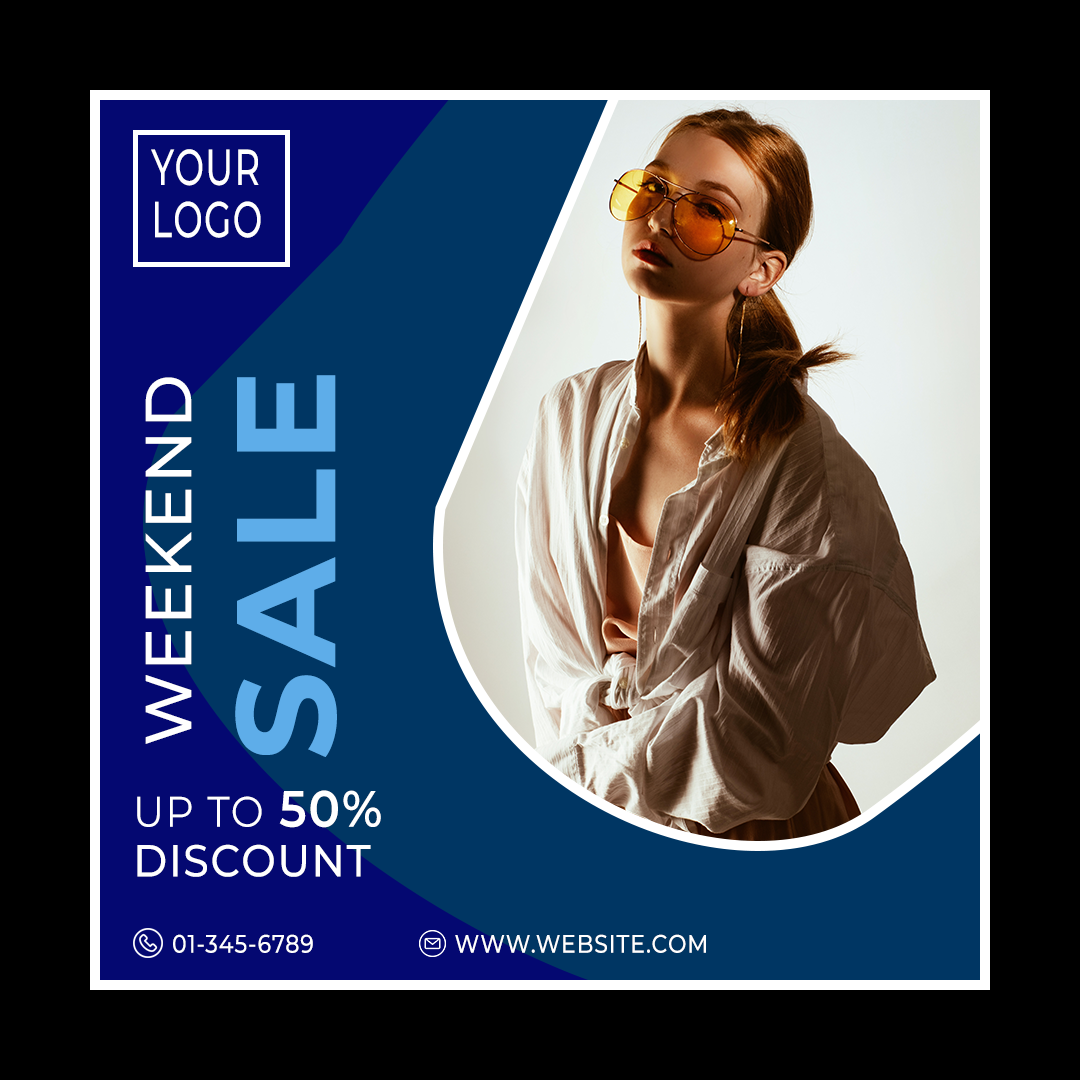
<style>
.page{position:relative;width:1080px;height:1080px;background:#000000}
.page>*{position:absolute;margin:0}
.t1{font:50.6px "Montserrat-Medium";letter-spacing:0.04em;color:#ffffff;scale:0.7 1}
.t2{font:65px "Montserrat-Medium";letter-spacing:0.04em;color:#ffffff}
.t3{font:140px "Montserrat-Bold";letter-spacing:0.04em;color:#5eade9}
.t4{font:42.8px "Montserrat-Regular";letter-spacing:0.04em;color:#ffffff;scale:0.92 1}
.t5{font:51.1px "Montserrat-SemiBold";letter-spacing:0.04em;color:#ffffff;scale:0.92 1}
.t6{font:44.8px "Montserrat-Medium";letter-spacing:0.04em;color:#ffffff;scale:0.92 1}
.t7{font:25.5px "Montserrat-Medium";letter-spacing:0.04em;color:#ffffff;scale:0.86 1}
</style>
<div class="page">
<p class="t1" style="left:151px;top:149px;width:110px;height:89px">YOUR <br>LOGO</p>
<p class="t2" style="left:145px;top:377px;width:47px;height:367px;rotate:-90deg">WEEKEND</p>
<p class="t3" style="left:235px;top:375px;width:102px;height:382px;rotate:-90deg">SALE</p>
<p class="t4" style="left:137px;top:790px;width:244px;height:38px">UP TO <span class="t5">50%</span></p>
<p class="t6" style="left:137px;top:844px;width:234px;height:33px">DISCOUNT</p>
<p class="t7" style="left:173px;top:934px;width:140px;height:19px">01-345-6789</p>
<p class="t7" style="left:455px;top:934px;width:251px;height:19px">WWW.WEBSITE.COM</p>
</div>
